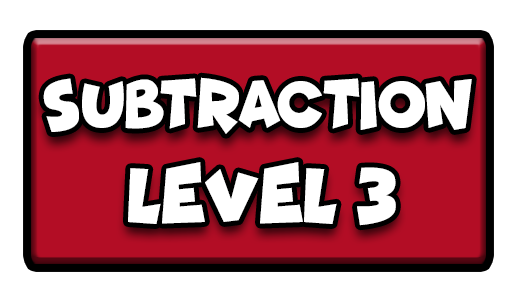
<style>
.page{position:relative;width:517px;height:301px;background:#ffffff}
.page>*{position:absolute;margin:0}
.t1{font:68.8px "Funhouse";color:#ffffff;scale:0.85 1}
.t2{font:77.7px "Funhouse";color:#ffffff;scale:0.95 1}
</style>
<div class="page">
<p class="t1" style="left:43px;top:77px;width:429px;height:57px">SUBTRACTION</p>
<p class="t2" style="left:128px;top:162px;width:268px;height:64px">LEVEL 3</p>
</div>
